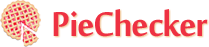
<style>
.page{position:relative;width:209px;height:47px;background:#ffffff}
.page>*{position:absolute;margin:0}
.t1{font:52.9px "MoolBoran";letter-spacing:-0.025em;color:#ee3142}
</style>
<div class="page">
<p class="t1" style="left:53px;top:9px;width:155px;height:28px">PieChecker</p>
</div>
